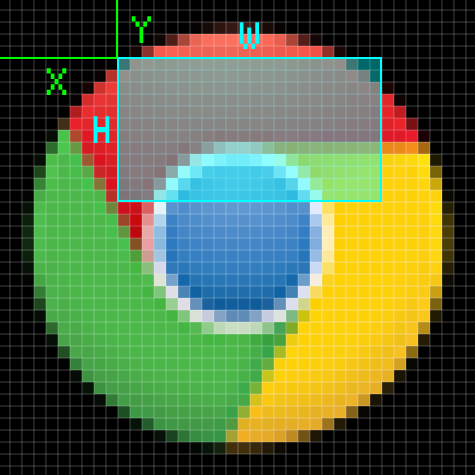
<style>
.page{position:relative;width:475px;height:475px;background:#000000}
.page>*{position:absolute;margin:0}
.t1{font:45px "Silkscreen";color:#00ff00;scale:0.72 1}
.t2{font:45px "Silkscreen";color:#00ffff;scale:0.72 1}
</style>
<div class="page">
<p class="t1" style="left:131px;top:16px;width:20px;height:27px">y</p>
<p class="t2" style="left:239px;top:22px;width:20px;height:27px">w</p>
<p class="t1" style="left:46px;top:68px;width:21px;height:27px">x</p>
<p class="t2" style="left:93px;top:116px;width:17px;height:27px">h</p>
</div>
